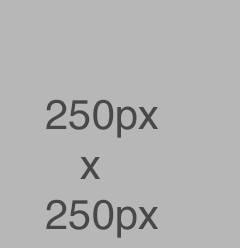
<style>
.page{position:relative;width:240px;height:248px;background:#b7b7b7}
.page>*{position:absolute;margin:0}
.t1{font:41.7px "Helvetica";color:#494848}
</style>
<div class="page">
<p class="t1" style="left:46px;top:99px;width:112px;height:139px">250px <br>       x    <br>    250px</p>
</div>
